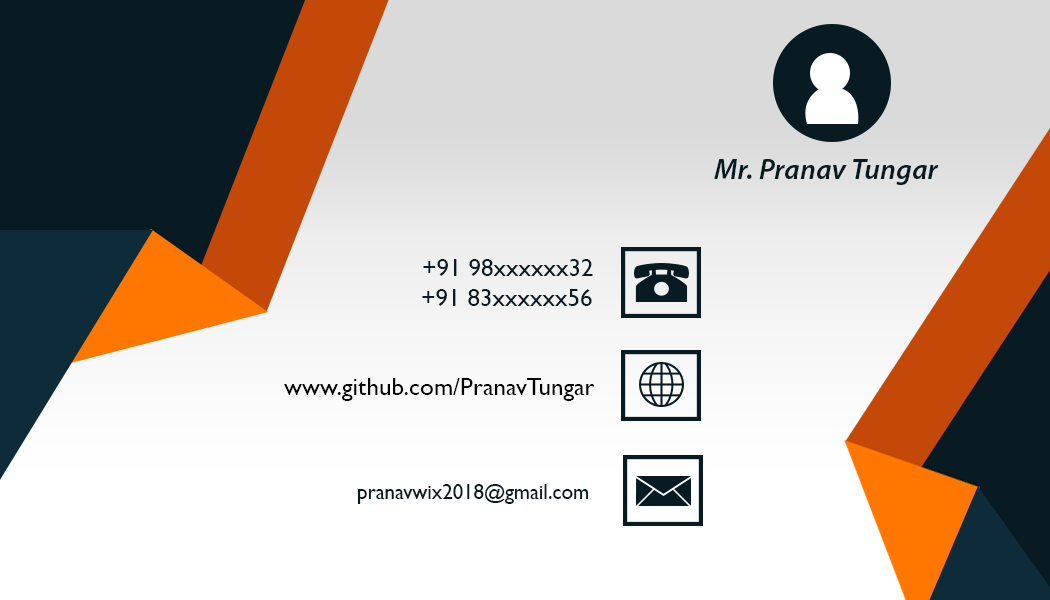
<style>
.page{position:relative;width:1050px;height:600px}
.page>*{position:absolute;margin:0}
.t1{font:29.2px "MyriadPro-SemiboldIt";color:#081b22}
.t2{font:25px "GillSansMT";color:#081b22}
.t3{font:25px "GillSansMT";color:#000000}
.t4{font:20.8px "GillSansMT";color:#081b22}
</style>
<div class="page">
<p class="t1" style="left:714px;top:159px;width:225px;height:26px">Mr. Pranav Tungar</p>
<p class="t2" style="left:423px;top:259px;width:170px;height:17px">+91 98xxxxxx32</p>
<p class="t2" style="left:422px;top:289px;width:170px;height:17px">+91 83xxxxxx56</p>
<p class="t3" style="left:284px;top:378px;width:311px;height:23px">www.github.com/PranavTungar</p>
<p class="t4" style="left:357px;top:484px;width:232px;height:20px">pranavwix2018@gmail.com</p>
</div>
